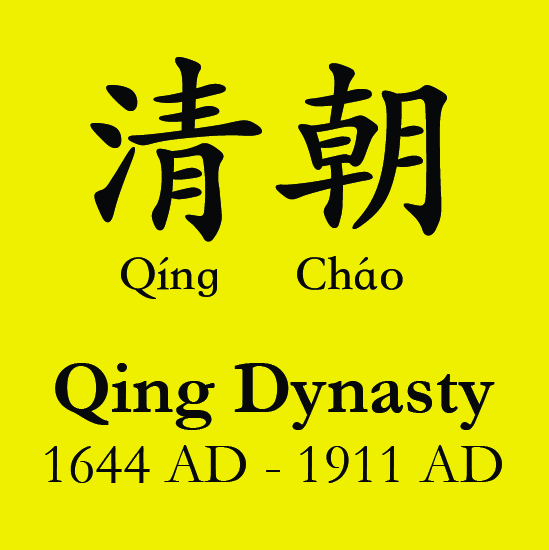
<style>
.page{position:relative;width:549px;height:550px;background:#efef00}
.page>*{position:absolute;margin:0}
.t1{font:200px "STKaiti-SC-Bold";color:#070809}
.t2{font:50px "STKaiti-SC-Bold";color:#070809}
.t3{font:58.3px "Garamond";color:#070809}
.t4{font:75px "Garamond-Bold";color:#070809}
</style>
<div class="page">
<p class="t1" style="left:90px;top:57px;width:357px;height:185px">清朝</p>
<p class="t2" style="left:121px;top:256px;width:282px;height:43px">Qíng      Cháo</p>
<p class="t3" style="left:45px;top:363px;width:457px;height:120px;text-align:center"><span class="t4">Qing Dynasty<br></span>1644 AD - 1911 AD</p>
</div>
